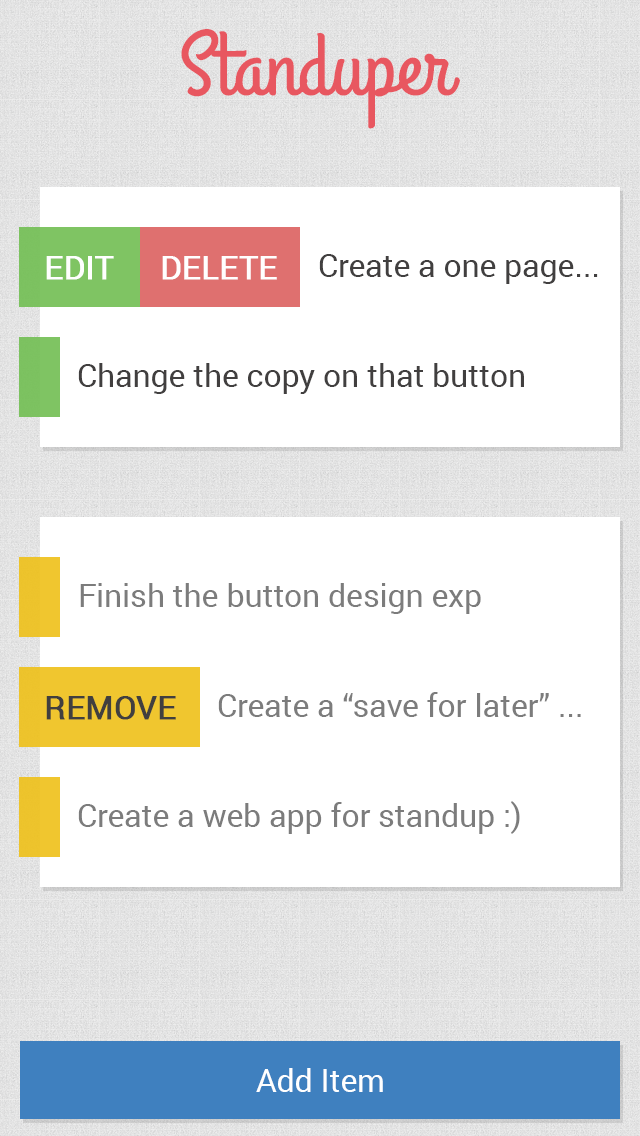
<style>
.page{position:relative;width:640px;height:1136px;background:#ffffff}
.page>*{position:absolute;margin:0}
.t1{font:90.3px "GrandHotel-Regular";color:#e85760}
.t2{font:31.7px "Roboto-Regular";color:#ffffff;font-weight:bold}
.t3{font:31.7px "Roboto-Regular";color:#413f3f}
.t4{font:31.7px "Roboto-Regular";color:#7c7c7c}
.t5{font:31.7px "Roboto-Regular";color:#413f3f;font-weight:bold}
.t6{font:31.7px "Roboto-Regular";color:#ffffff}
</style>
<div class="page">
<p class="t1" style="left:181px;top:29px;width:279px;height:100px">Standuper</p>
<p class="t2" style="left:46px;top:256px;width:68px;height:24px">EDIT</p>
<p class="t2" style="left:162px;top:256px;width:115px;height:24px">DELETE</p>
<p class="t3" style="left:319px;top:254px;width:279px;height:30px">Create a one page...</p>
<p class="t3" style="left:78px;top:363px;width:446px;height:31px">Change the copy on that button</p>
<p class="t4" style="left:80px;top:583px;width:401px;height:31px">Finish the button design exp</p>
<p class="t5" style="left:46px;top:696px;width:130px;height:24px">REMOVE</p>
<p class="t4" style="left:218px;top:692px;width:363px;height:25px">Create a “save for later” ...</p>
<p class="t4" style="left:78px;top:801px;width:442px;height:33px">Create a web app for standup :)</p>
<p class="t6" style="left:256px;top:1068px;width:127px;height:24px">Add Item</p>
</div>
